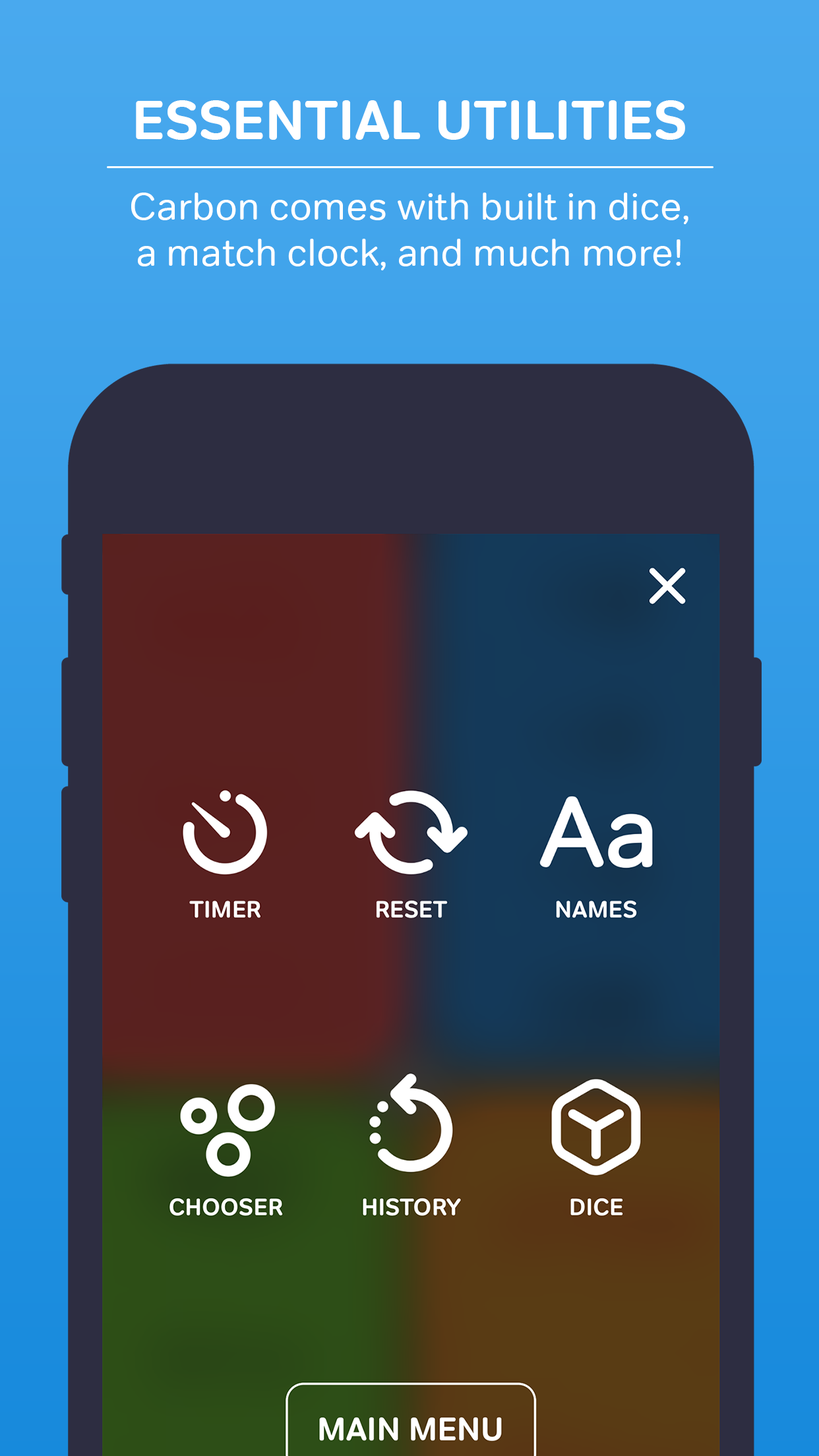
<style>
.page{position:relative;width:819px;height:1456px}
.page>*{position:absolute;margin:0}
.t1{font:55px "Tondo-Bold";color:#ffffff}
.t2{font:38.5px "Tondo-Regular";color:#ffffff}
</style>
<div class="page">
<p class="t1" style="left:136px;top:100px;width:549px;height:40px">ESSENTIAL UTILITIES</p>
<p class="t2" style="left:131px;top:193px;width:557px;height:77px;text-align:center">Carbon comes with built in dice,<br>a match clock, and much more!</p>
</div>
